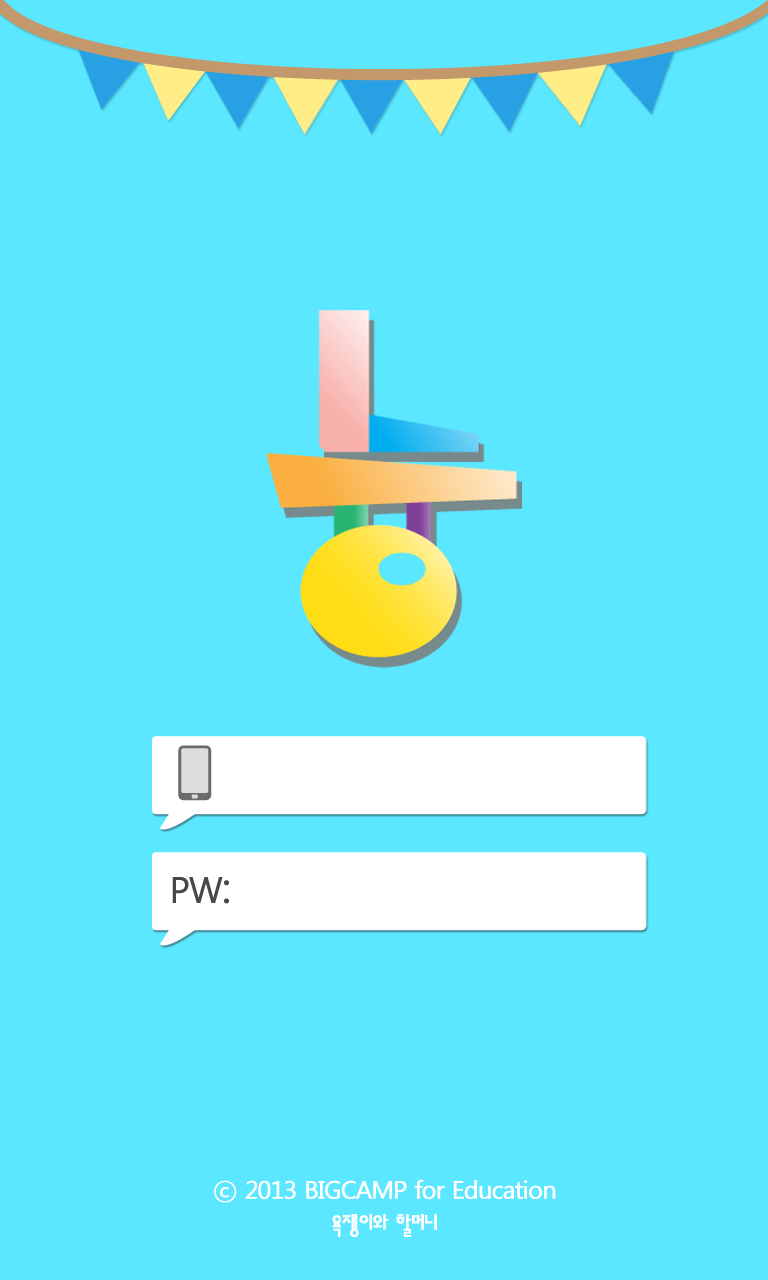
<style>
.page{position:relative;width:768px;height:1280px;background:#5ae7ff}
.page>*{position:absolute;margin:0}
.t1{font:35.6px "MalgunGothicRegular";letter-spacing:-0.05em;color:#484848;font-weight:bold}
.t2{font:42.2px "MalgunGothicRegular";letter-spacing:-0.05em;color:#484848;font-weight:bold}
.t3{font:24.4px "MalgunGothicRegular";letter-spacing:-0.05em;color:#ffffff;font-weight:bold}
.t4{font:24.4px "ahn2006-M";letter-spacing:-0.05em;color:#ffffff;font-weight:bold}
</style>
<div class="page">
<p class="t1" style="left:172px;top:877px;width:57px;height:27px">PW<span class="t2">:</span></p>
<p class="t3" style="left:214px;top:1179px;width:342px;height:24px">ⓒ 2013 BIGCAMP for Education</p>
<p class="t4" style="left:332px;top:1214px;width:105px;height:23px">욕쟁이와 할머니</p>
</div>
